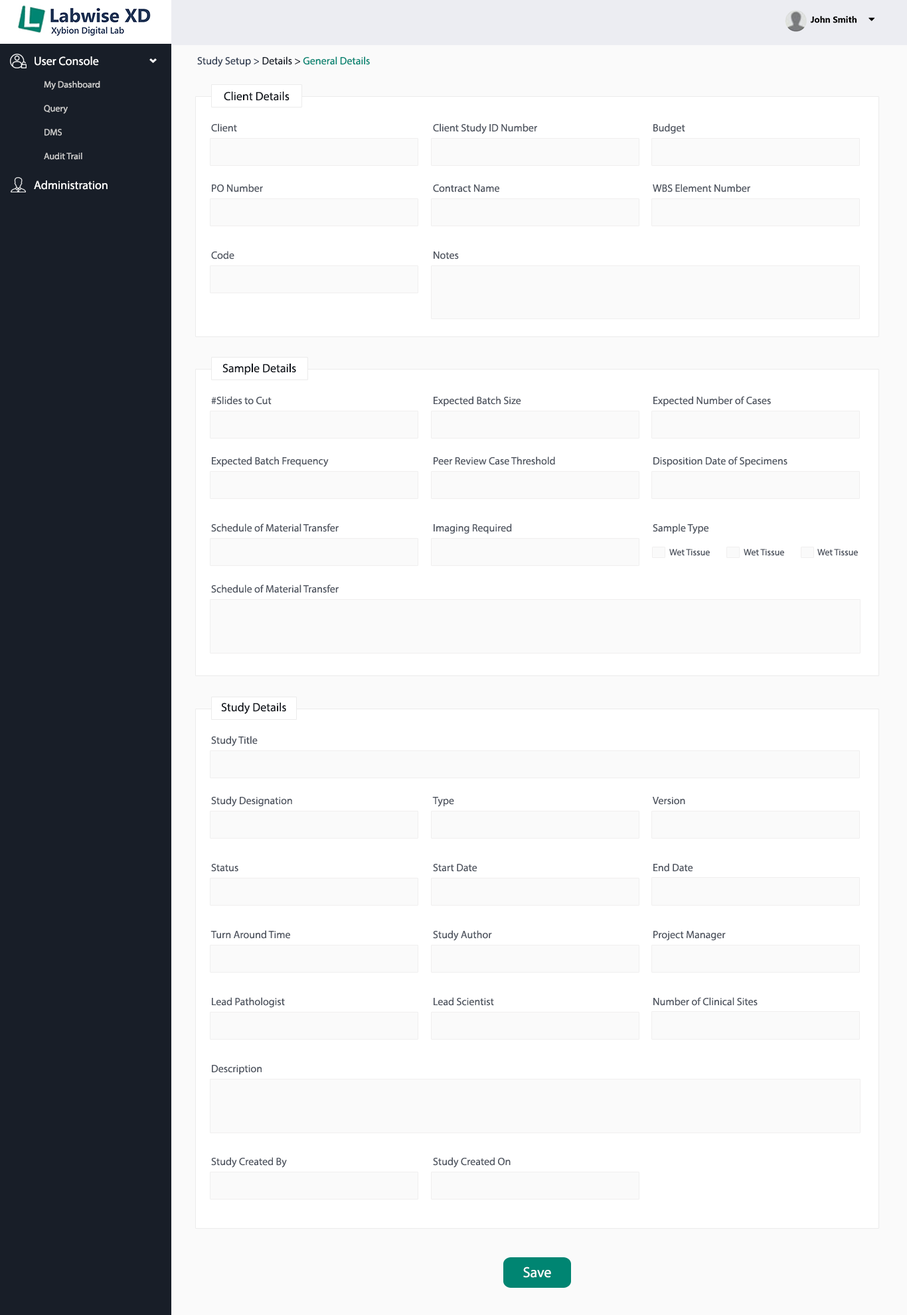
<style>
.page{position:relative;width:907px;height:1315px;background:#fafafa}
.page>*{position:absolute;margin:0}
.t1{font:11.9px "MyriadPro-Regular";color:#fefefe}
.t2{font:10.6px "MyriadPro-Regular";color:#008572}
.t3{font:10.6px "MyriadPro-Regular";color:#364256}
.t4{font:10.6px "MyriadPro-Regular";color:#181e28}
.t5{font:9.3px/23.9px "MyriadPro-Regular";color:#cccccc}
.t6{font:11.9px "MyriadPro-Regular";color:#10141b}
.t7{font:10.6px "MyriadPro-Regular";color:#505661}
.t8{font:9.3px "MyriadPro-Regular";color:#505661}
.t9{font:14.6px "MyriadPro-Regular";color:#ffffff}
</style>
<div class="page">
<p class="t1" style="left:35px;top:56px;width:64px;height:10px">User Console</p>
<p class="t2" style="left:197px;top:56px;width:173px;height:11px"><span class="t3">Study Setup &gt; </span><span class="t4">Details &gt; </span>General Details</p>
<p class="t5" style="left:44px;top:81px;width:56px;height:79px;text-align:right">My Dashboard<br>Query<br>DMS<br>Audit Trail</p>
<p class="t6" style="left:224px;top:92px;width:65px;height:9px">Client Details</p>
<p class="t7" style="left:211px;top:123px;width:26px;height:9px">Client</p>
<p class="t7" style="left:433px;top:123px;width:104px;height:11px">Client Study ID Number</p>
<p class="t7" style="left:653px;top:123px;width:32px;height:11px">Budget</p>
<p class="t1" style="left:34px;top:181px;width:74px;height:9px">Administration</p>
<p class="t7" style="left:212px;top:184px;width:51px;height:8px">PO Number</p>
<p class="t7" style="left:433px;top:184px;width:66px;height:8px">Contract Name</p>
<p class="t7" style="left:652px;top:184px;width:98px;height:8px">WBS Element Number</p>
<p class="t7" style="left:211px;top:251px;width:23px;height:8px">Code</p>
<p class="t7" style="left:433px;top:252px;width:26px;height:7px">Notes</p>
<p class="t6" style="left:222px;top:364px;width:74px;height:11px">Sample Details</p>
<p class="t7" style="left:211px;top:396px;width:60px;height:9px">#Slides to Cut</p>
<p class="t7" style="left:433px;top:396px;width:88px;height:11px">Expected Batch Size</p>
<p class="t7" style="left:653px;top:396px;width:117px;height:11px">Expected Number of Cases</p>
<p class="t7" style="left:212px;top:457px;width:117px;height:10px">Expected Batch Frequency</p>
<p class="t7" style="left:433px;top:457px;width:122px;height:8px">Peer Review Case Threshold</p>
<p class="t7" style="left:653px;top:457px;width:134px;height:10px">Disposition Date of Specimens</p>
<p class="t7" style="left:211px;top:524px;width:127px;height:8px">Schedule of Material Transfer</p>
<p class="t7" style="left:433px;top:524px;width:79px;height:10px">Imaging Required</p>
<p class="t7" style="left:652px;top:524px;width:57px;height:10px">Sample Type</p>
<p class="t8" style="left:669px;top:549px;width:40px;height:7px">Wet Tissue</p>
<p class="t8" style="left:743px;top:549px;width:41px;height:7px">Wet Tissue</p>
<p class="t8" style="left:817px;top:549px;width:40px;height:7px">Wet Tissue</p>
<p class="t7" style="left:211px;top:585px;width:127px;height:8px">Schedule of Material Transfer</p>
<p class="t6" style="left:221px;top:703px;width:65px;height:11px">Study Details</p>
<p class="t7" style="left:211px;top:736px;width:46px;height:11px">Study Title</p>
<p class="t7" style="left:211px;top:796px;width:81px;height:11px">Study Designation</p>
<p class="t7" style="left:432px;top:797px;width:22px;height:10px">Type</p>
<p class="t7" style="left:652px;top:797px;width:33px;height:8px">Version</p>
<p class="t7" style="left:211px;top:864px;width:27px;height:8px">Status</p>
<p class="t7" style="left:433px;top:864px;width:44px;height:8px">Start Date</p>
<p class="t7" style="left:653px;top:863px;width:40px;height:9px">End Date</p>
<p class="t7" style="left:210px;top:930px;width:80px;height:9px">Turn Around Time</p>
<p class="t7" style="left:433px;top:930px;width:59px;height:11px">Study Author</p>
<p class="t7" style="left:653px;top:931px;width:72px;height:10px">Project Manager</p>
<p class="t7" style="left:212px;top:997px;width:73px;height:11px">Lead Pathologist</p>
<p class="t7" style="left:433px;top:997px;width:61px;height:9px">Lead Scientist</p>
<p class="t7" style="left:653px;top:997px;width:104px;height:9px">Number of Clinical Sites</p>
<p class="t7" style="left:212px;top:1065px;width:49px;height:10px">Description</p>
<p class="t7" style="left:211px;top:1157px;width:76px;height:11px">Study Created By</p>
<p class="t7" style="left:433px;top:1157px;width:77px;height:11px">Study Created On</p>
<p class="t9" style="left:523px;top:1267px;width:28px;height:11px">Save</p>
</div>
